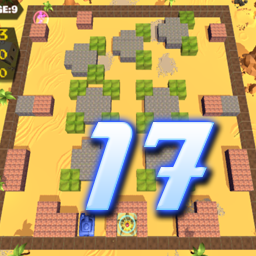
<style>
.page{position:relative;width:256px;height:256px}
.page>*{position:absolute;margin:0}
.t1{font:129.1px "Magneto-Bold";letter-spacing:0.02em;scale:0.96 1}
</style>
<div class="page">
<p class="t1" style="left:85px;top:122px;width:130px;height:88px">17</p>
</div>
